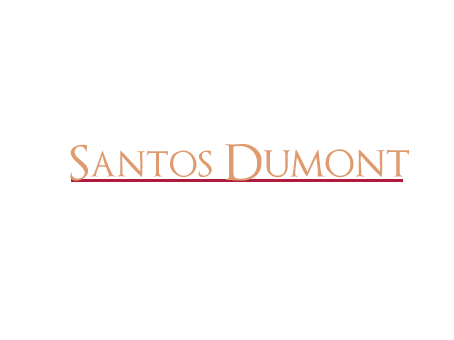
<style>
.page{position:relative;width:454px;height:340px;background:#ffffff}
.page>*{position:absolute;margin:0}
.t1{font:46.3px "OptimusPrinceps";color:#df9b6d}
.t2{font:48.4px "OptimusPrinceps";color:#df9b6d}
</style>
<div class="page">
<p class="t1" style="left:70px;top:144px;width:142px;height:37px">Santos</p>
<p class="t2" style="left:225px;top:144px;width:184px;height:37px">Dumont</p>
</div>
